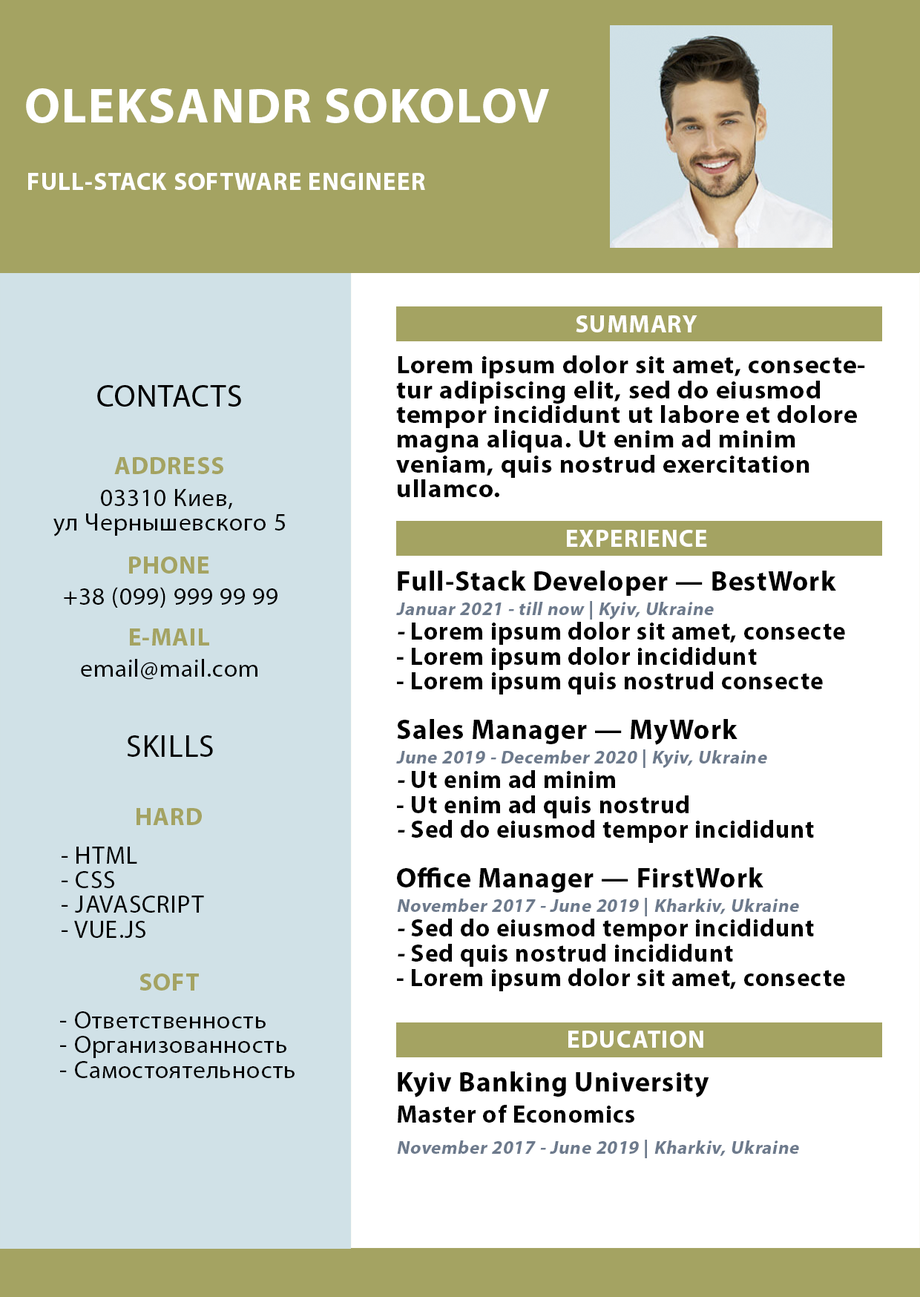
<style>
.page{position:relative;width:920px;height:1297px;background:#ffffff}
.page>*{position:absolute;margin:0}
.t1{font:49.4px "MyriadPro-Bold";letter-spacing:0.03em;color:#ffffff}
.t2{font:24.7px "MyriadPro-Bold";letter-spacing:0.03em;color:#ffffff}
.t3{font:24.7px "MyriadPro-Bold";letter-spacing:0.03em;color:#ffffff;text-transform:uppercase}
.t4{font:24.7px/24.7px "MyriadPro-Bold";letter-spacing:0.03em;color:#000000;scale:1.06 1}
.t5{font:24.7px "MyriadPro-Bold";letter-spacing:0.03em;color:#a4a362}
.t6{font:24.7px/24.7px "MyriadPro-Regular";letter-spacing:0.03em;color:#000000}
.t7{font:24.7px/24.7px "MyriadPro-Bold";letter-spacing:0.03em;color:#000000}
.t8{font:27.8px/24.7px "MyriadPro-Bold";letter-spacing:0.03em;color:#000000}
.t9{font:18.5px/24.7px "MyriadPro-Bold";letter-spacing:0.03em;color:#6d7a8c;font-style:italic}
.t10{font:18.5px/24.7px "MyriadPro-Bold";letter-spacing:0.03em;color:#6d7a8c}
.t11{font:24.7px/24.7px "MyriadPro-Bold";letter-spacing:0.03em;color:#000000;font-style:italic}
.t12{font:24.7px/18.5px "MyriadPro-Bold";letter-spacing:0.03em;color:#000000}
.t13{font:24.7px "MyriadPro-Regular";letter-spacing:0.03em;color:#000000}
.t14{font:30.9px "MyriadPro-Regular";letter-spacing:0.03em;color:#000000}
.t15{font:18.5px/30.9px "MyriadPro-Bold";letter-spacing:0.03em;color:#6d7a8c;font-style:italic}
.t16{font:27.8px/30.9px "MyriadPro-Bold";letter-spacing:0.03em;color:#000000}
.t17{font:24.7px/30.9px "MyriadPro-Bold";letter-spacing:0.03em;color:#000000}
.t18{font:18.5px/30.9px "MyriadPro-Bold";letter-spacing:0.03em;color:#6d7a8c}
</style>
<div class="page">
<p class="t1" style="left:26px;top:88px;width:523px;height:35px">OLEKSANDR SOKOLOV</p>
<p class="t2" style="left:28px;top:173px;width:397px;height:17px">FULL-STACK SOFTWARE ENGINEER</p>
<p class="t3" style="left:576px;top:315px;width:121px;height:17px">summary</p>
<p class="t4" style="left:396px;top:355px;width:469px;height:142px">Lorem ipsum dolor sit amet, consectetur adipiscing elit, sed do eiusmod tempor incididunt ut labore et dolore magna aliqua. Ut enim ad minim veniam, quis nostrud exercitation <br>ullamco.</p>
<p class="t5" style="left:114px;top:457px;width:109px;height:17px">ADDRESS</p>
<p class="t6" style="left:53px;top:489px;width:232px;height:47px;text-align:center">03310 Киев, <br>ул Чернышевского 5</p>
<p class="t3" style="left:567px;top:530px;width:140px;height:17px">experience</p>
<p class="t5" style="left:129px;top:556px;width:80px;height:17px">PHONE</p>
<p class="t7" style="left:396px;top:570px;width:449px;height:421px"><span class="t8">Full-Stack Developer — BestWork<br></span><span class="t9">Januar 2021 - till now</span><span class="t10"> | </span><span class="t9">Kyiv, Ukraine<br></span><span class="t11">- </span>Lorem<span class="t12"> ipsum dolor sit amet, consect</span>e<br>- Lorem ipsum dolor incididunt <br>- Lorem ipsum quis nostrud consecte<br><br><span class="t8">Sales Manager — MyWork<br></span><span class="t9">June 2019 - December 2020 </span><span class="t10">| </span><span class="t9">Kyiv, Ukraine<br></span><span class="t11">- </span>Ut enim ad minim<br>- Ut enim ad quis nostrud<br><span class="t11">- </span>Sed do eiusmod tempor incididunt<br><br><span class="t8">Office Manager — FirstWork<br></span><span class="t9">November 2017 - June 2019</span><span class="t10"> | </span><span class="t9">Kharkiv, Ukraine<br></span><span class="t11">- </span>Sed do eiusmod tempor incididunt<br><span class="t11">- </span>Sed quis nostrud incididunt<br>- Lorem ipsum dolor sit amet, consecte</p>
<p class="t13" style="left:64px;top:587px;width:213px;height:20px">+38 (099) 999 99 99</p>
<p class="t5" style="left:130px;top:628px;width:79px;height:17px">E-MAIL</p>
<p class="t13" style="left:81px;top:659px;width:176px;height:20px">email@mail.com</p>
<p class="t14" style="left:127px;top:735px;width:86px;height:22px">SKILLS</p>
<p class="t5" style="left:136px;top:808px;width:66px;height:17px">HARD</p>
<p class="t6" style="left:62px;top:846px;width:142px;height:92px">- HTML<br>- CSS<br>- JAVASCRIPT<br>- VUE.JS</p>
<p class="t5" style="left:139px;top:973px;width:60px;height:17px">SOFT</p>
<p class="t6" style="left:60px;top:1011px;width:234px;height:67px">- Ответственность<br>- Организованность<br>- Самостоятельность</p>
<p class="t3" style="left:568px;top:1030px;width:135px;height:17px">education</p>
<p class="t15" style="left:397px;top:1071px;width:402px;height:87px"><span class="t16">Kyiv Banking University<br></span><span class="t17">Master of Economics<br></span>November 2017 - June 2019<span class="t18"> | </span>Kharkiv, Ukraine</p>
</div>
